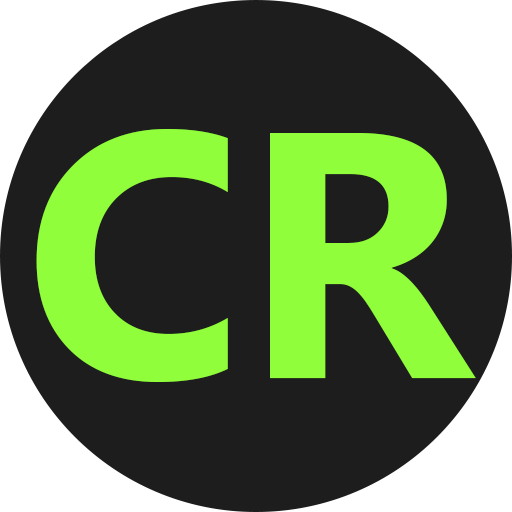
<style>
.page{position:relative;width:512px;height:512px;background:#1d1d1d}
.page>*{position:absolute;margin:0}
.t1{font:350px "SegoeUI-Bold";color:#91fe3c}
</style>
<div class="page">
<p class="t1" style="left:36px;top:129px;width:440px;height:253px">CR</p>
</div>
